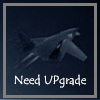
<style>
.page{position:relative;width:100px;height:100px}
.page>*{position:absolute;margin:0}
.t1{font:12px "TempusSansITC";color:#ffffff}
</style>
<div class="page">
<p class="t1" style="left:14px;top:74px;width:72px;height:14px">Need UPgrade</p>
</div>
